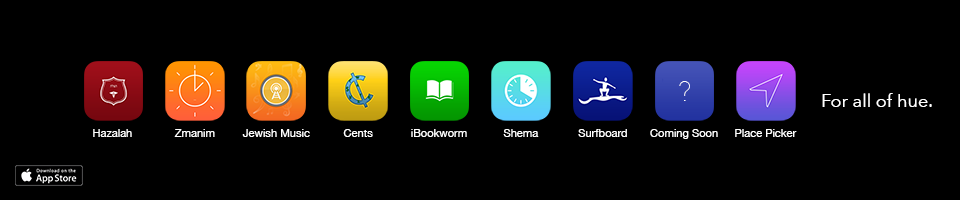
<style>
.page{position:relative;width:960px;height:200px;background:#000000}
.page>*{position:absolute;margin:0}
.t1{font:27.8px "AvenirNext-UltraLight";color:#ffffff}
.t2{font:18px "AvenirNext-Regular";color:#ffffff}
.t3{font:11.1px "HelveticaNeue";color:#ffffff}
</style>
<div class="page">
<p class="t1" style="left:679px;top:81px;width:11px;height:20px">?</p>
<p class="t2" style="left:822px;top:93px;width:110px;height:14px">For all of hue.</p>
<p class="t3" style="left:93px;top:129px;width:39px;height:8px">Hazalah</p>
<p class="t3" style="left:174px;top:129px;width:41px;height:8px">Zmanim</p>
<p class="t3" style="left:242px;top:129px;width:68px;height:8px">Jewish Music</p>
<p class="t3" style="left:343px;top:129px;width:30px;height:8px">Cents</p>
<p class="t3" style="left:411px;top:129px;width:56px;height:8px">iBookworm</p>
<p class="t3" style="left:503px;top:129px;width:36px;height:8px">Shema</p>
<p class="t3" style="left:578px;top:129px;width:49px;height:8px">Surfboard</p>
<p class="t3" style="left:650px;top:129px;width:68px;height:10px">Coming Soon</p>
<p class="t3" style="left:735px;top:129px;width:62px;height:8px">Place Picker</p>
</div>
